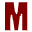
<style>
.page{position:relative;width:32px;height:32px;background:#ffffff}
.page>*{position:absolute;margin:0}
.t1{font:37.8px "Impact";color:#810000}
</style>
<div class="page">
<p class="t1" style="left:4px;top:1px;width:25px;height:31px">M</p>
</div>
